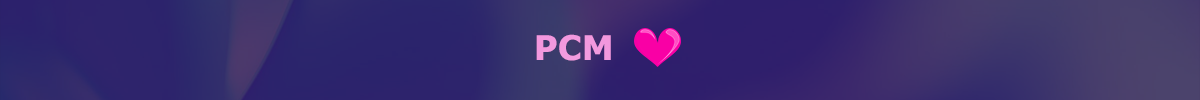
<style>
.page{position:relative;width:1200px;height:100px}
.page>*{position:absolute;margin:0}
.t1{font:34.1px "Tahoma-Bold";letter-spacing:0.025em;color:#f299de;scale:1.03 1}
</style>
<div class="page">
<p class="t1" style="left:536px;top:34px;width:75px;height:27px">PCM</p>
</div>
